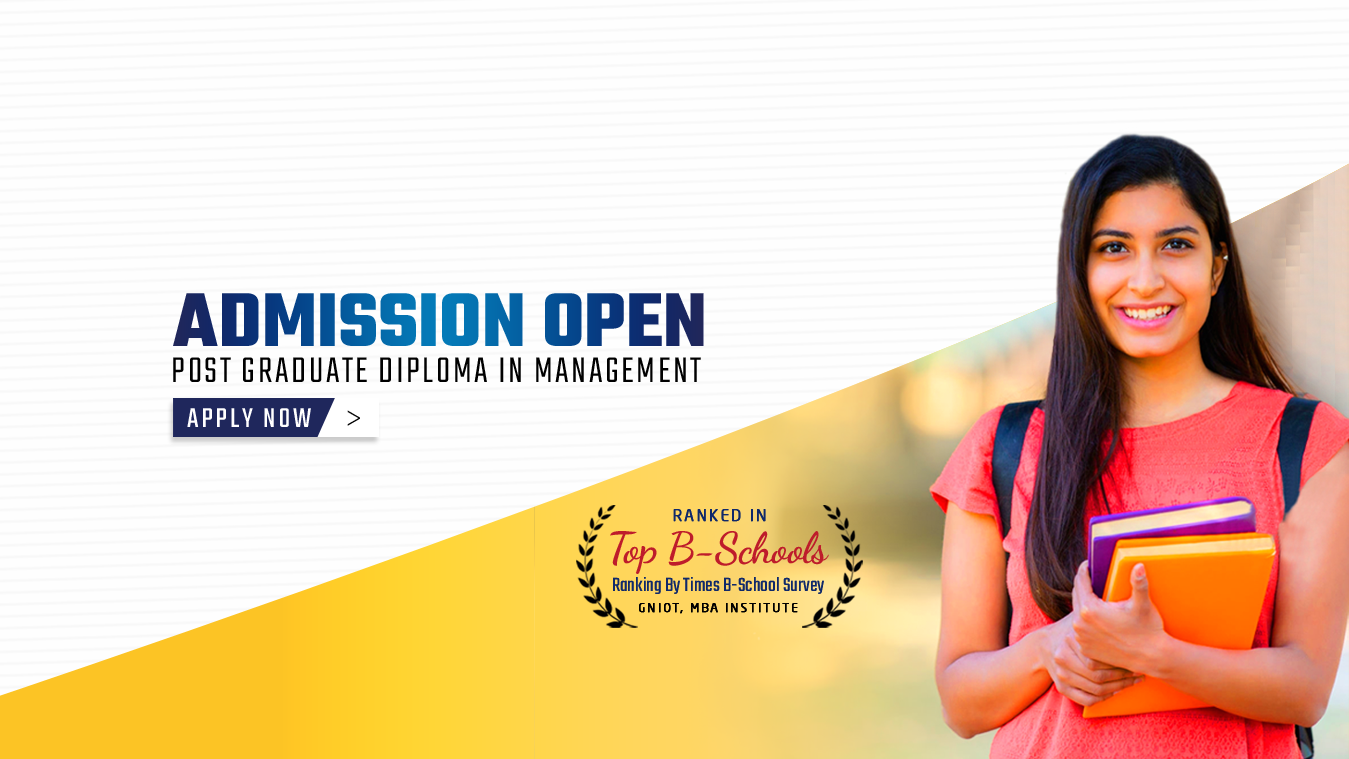
<style>
.page{position:relative;width:1349px;height:759px;background:#fefefe}
.page>*{position:absolute;margin:0}
.t1{font:82.2px "Teko-Bold";text-transform:uppercase}
.t2{font:39.6px "Teko-Light";letter-spacing:0.065em;color:#000000;text-transform:uppercase}
.t3{font:29.9px "Teko-Regular";letter-spacing:0.1em;color:#ffffff;text-transform:uppercase}
.t4{font:29.9px "Square721BT-RomanCondensed";letter-spacing:0.1em;color:#000000;text-transform:uppercase;scale:0.71 1}
.t5{font:15.1px "NeoSansPro-Regular";letter-spacing:0.14em;color:#10296a;text-transform:uppercase;font-weight:bold}
.t6{font:43.1px "DancingScript-Bold";letter-spacing:-0.02em;color:#be1c2b}
.t7{font:21px "Teko-Regular";color:#10296a}
.t8{font:12px "NeoSansPro-Regular";letter-spacing:0.14em;color:#000000;text-transform:uppercase;font-weight:bold}
</style>
<div class="page">
<p class="t1" style="left:173px;top:293px;width:531px;height:53px">Admission Open</p>
<p class="t2" style="left:173px;top:357px;width:528px;height:25px">Post Graduate Diploma in Management</p>
<p class="t3" style="left:187px;top:408px;width:124px;height:19px">Apply Now</p>
<p class="t4" style="left:347px;top:410px;width:13px;height:16px">&gt;</p>
<p class="t5" style="left:673px;top:509px;width:93px;height:13px">Ranked in</p>
<p class="t6" style="left:610px;top:531px;width:219px;height:43px">Top B-Schools</p>
<p class="t7" style="left:613px;top:577px;width:211px;height:17px">Ranking By Times B-School Survey</p>
<p class="t8" style="left:639px;top:603px;width:159px;height:11px">GNIOT, MBA INstitute</p>
</div>
